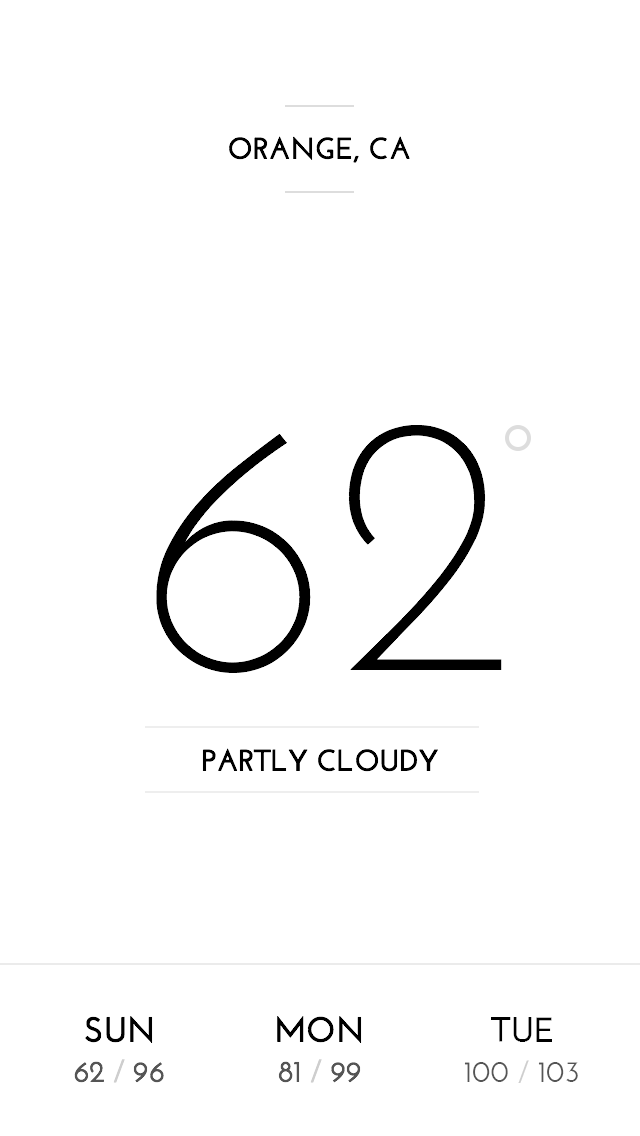
<style>
.page{position:relative;width:640px;height:1136px;background:#ffffff}
.page>*{position:absolute;margin:0}
.t1{font:30px "JosefinSans-Bold";color:#000000;text-transform:uppercase}
.t2{font:371.4px "JosefinSans-Light";color:#000000}
.t3{font:35px "JosefinSans-Bold";color:#000000}
.t4{font:35.1px "JosefinSans-Bold";color:#000000}
.t5{font:30px "JosefinSans-SemiBold";color:#555555}
.t6{font:30px "JosefinSans-SemiBold";color:#cecece}
.t7{font:30.1px "JosefinSans-SemiBold";color:#cecece}
.t8{font:30.1px "JosefinSans-SemiBold";color:#555555}
</style>
<div class="page">
<p class="t1" style="left:229px;top:136px;width:181px;height:27px">Orange, CA</p>
<p class="t2" style="left:156px;top:425px;width:346px;height:248px">62</p>
<p class="t1" style="left:202px;top:748px;width:236px;height:24px">Partly Cloudy</p>
<p class="t3" style="left:85px;top:1016px;width:68px;height:27px">SUN</p>
<p class="t3" style="left:277px;top:1016px;width:85px;height:27px">MON</p>
<p class="t4" style="left:491px;top:1017px;width:61px;height:25px">TUE</p>
<p class="t5" style="left:74px;top:1059px;width:90px;height:24px">62 <span class="t6">/</span> 96</p>
<p class="t5" style="left:278px;top:1059px;width:83px;height:24px">81 <span class="t6">/</span> 99</p>
<p class="t5" style="left:464px;top:1060px;width:114px;height:23px">100 <span class="t7">/</span><span class="t8"> 103</span></p>
</div>
